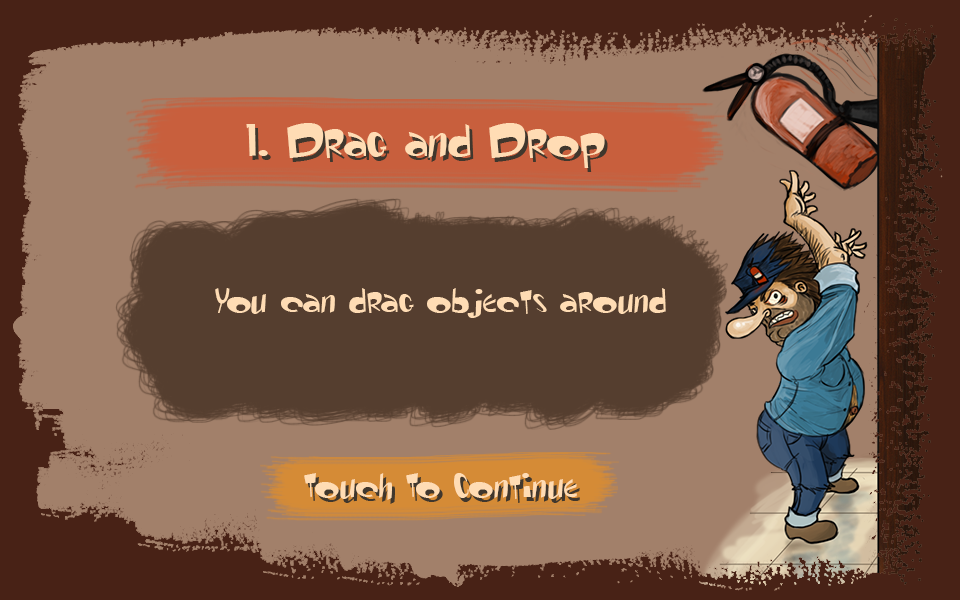
<style>
.page{position:relative;width:960px;height:600px;background:#a2806a}
.page>*{position:absolute;margin:0}
.t1{font:48px "RenStimpy";color:#ffdcb4}
.t2{font:36px "RenStimpy";color:#ffdcb4}
</style>
<div class="page">
<p class="t1" style="left:246px;top:123px;width:359px;height:45px">1. Drag and Drop</p>
<p class="t2" style="left:215px;top:288px;width:451px;height:30px">You can drag objects around</p>
<p class="t2" style="left:304px;top:473px;width:273px;height:27px">Touch To Continue</p>
</div>
